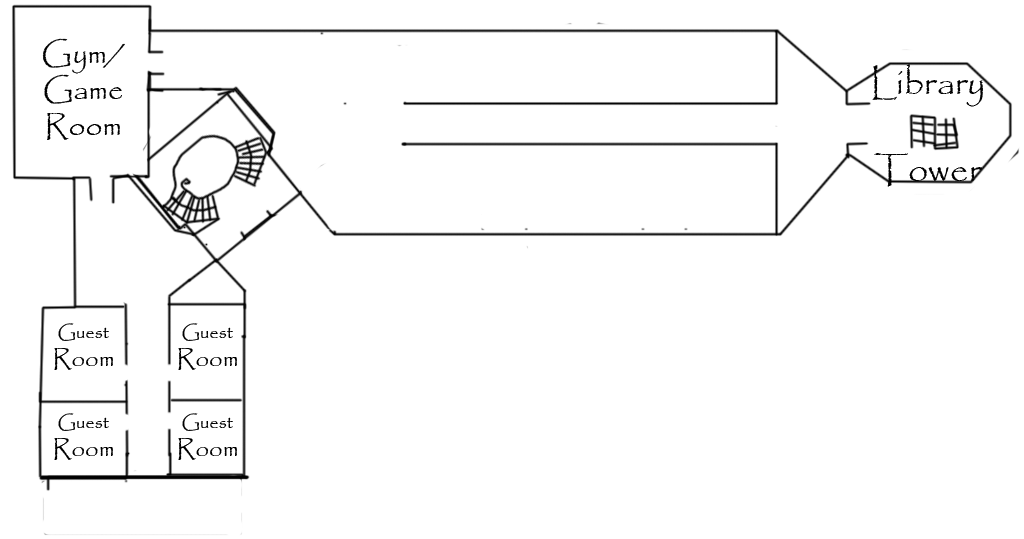
<style>
.page{position:relative;width:1024px;height:539px;background:#ffffff}
.page>*{position:absolute;margin:0}
.t1{font:30px "Papyrus-Regular";color:#000000}
.t2{font:36px "Papyrus-Regular";color:#000000}
.t3{font:18px "Papyrus-Regular";color:#000000}
.t4{font:24px "Papyrus-Regular";color:#000000}
</style>
<div class="page">
<p class="t1" style="left:42px;top:38px;width:83px;height:102px;text-align:center">Gym/<br>Game Room</p>
<p class="t2" style="left:872px;top:64px;width:111px;height:123px;text-align:center">Library<br><br>Tower</p>
<p class="t3" style="left:54px;top:323px;width:59px;height:47px;text-align:center">Guest <span class="t4">Room</span></p>
<p class="t3" style="left:178px;top:323px;width:59px;height:47px;text-align:center">Guest <span class="t4">Room</span></p>
<p class="t3" style="left:54px;top:413px;width:59px;height:47px;text-align:center">Guest <span class="t4">Room</span></p>
<p class="t3" style="left:178px;top:413px;width:59px;height:47px;text-align:center">Guest <span class="t4">Room</span></p>
</div>
